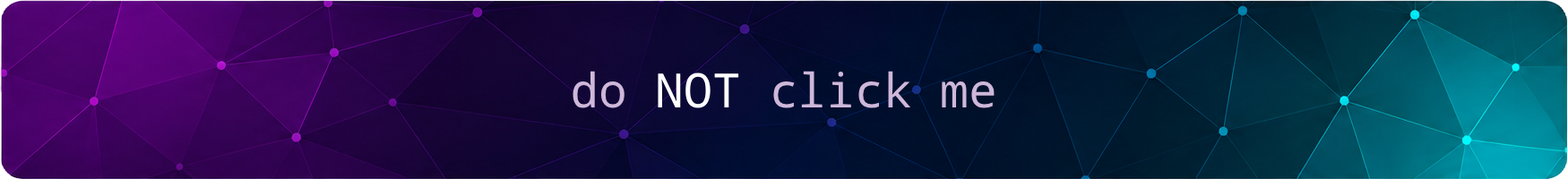
<style>
.page{position:relative;width:1568px;height:179px}
.page>*{position:absolute;margin:0}
.t1{font:47.5px "DroidSansMono";color:#ceb7d9}
.t2{font:47.5px "DroidSansMono";color:#ffffff}
</style>
<div class="page">
<p class="t1" style="left:573px;top:71px;width:422px;height:37px">do <span class="t2">NOT </span>click me</p>
</div>
